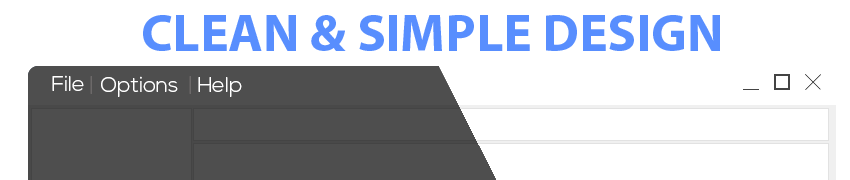
<style>
.page{position:relative;width:850px;height:180px;background:#ffffff}
.page>*{position:absolute;margin:0}
.t1{font:53px "MyriadPro-Bold";color:#588efe}
.t2{font:21.3px "NexaLight";color:#ffffff}
</style>
<div class="page">
<p class="t1" style="left:143px;top:15px;width:577px;height:36px">CLEAN &amp; SIMPLE DESIGN</p>
<p class="t2" style="left:52px;top:75px;width:32px;height:16px">File</p>
<p class="t2" style="left:101px;top:76px;width:77px;height:21px">Options</p>
<p class="t2" style="left:198px;top:77px;width:44px;height:20px">Help</p>
</div>
